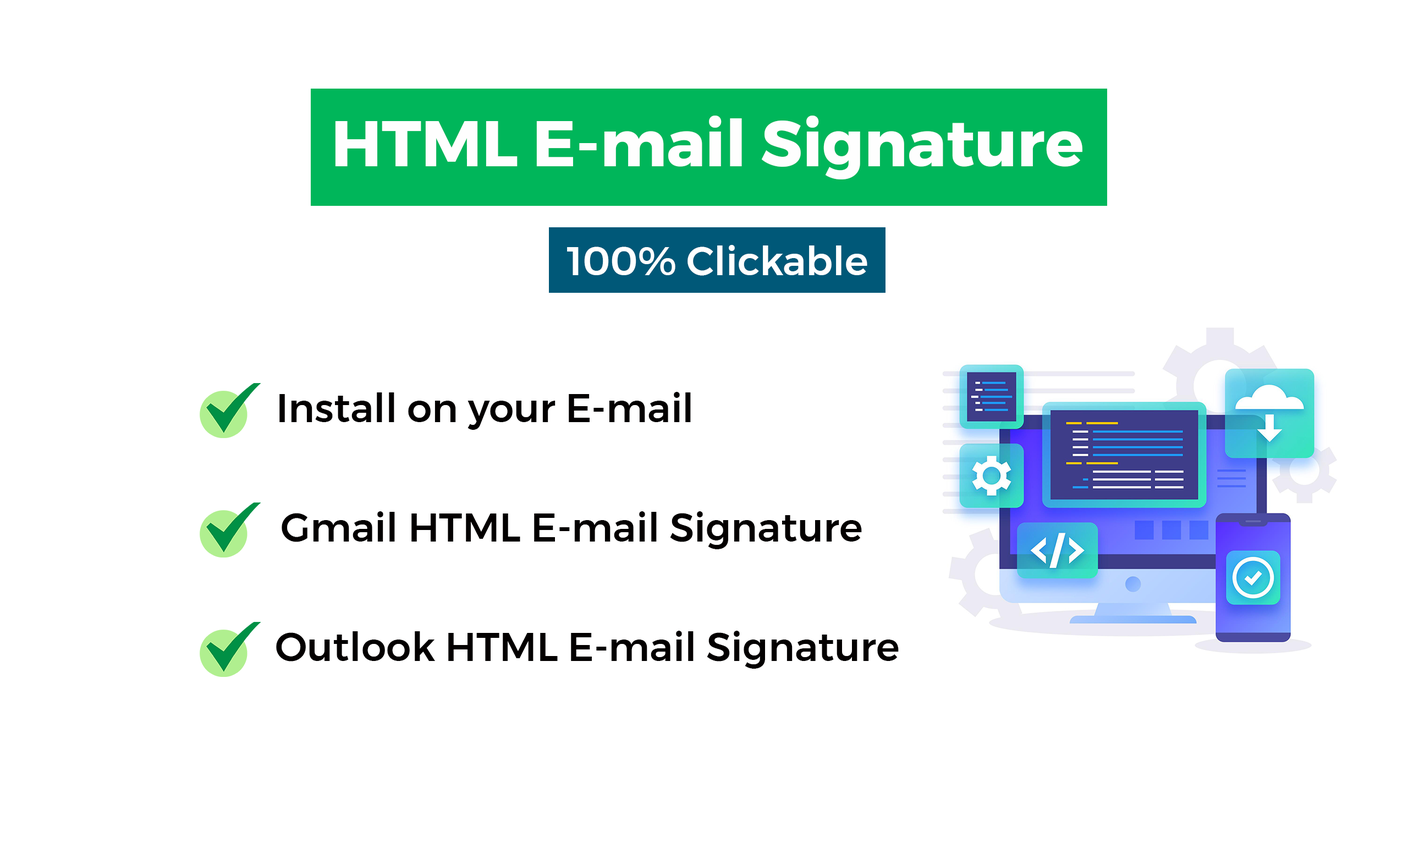
<style>
.page{position:relative;width:1408px;height:847px;background:#ffffff}
.page>*{position:absolute;margin:0}
.t1{font:64.4px "Montserrat-Bold";color:#fefefe}
.t2{font:39.6px "Montserrat-Medium";color:#ffffff}
.t3{font:39.6px "Montserrat-Medium";color:#030000}
</style>
<div class="page">
<p class="t1" style="left:335px;top:116px;width:748px;height:63px">HTML E-mail Signature</p>
<p class="t2" style="left:567px;top:245px;width:301px;height:31px">100% Clickable</p>
<p class="t3" style="left:279px;top:392px;width:412px;height:38px">Install on your E-mail</p>
<p class="t3" style="left:282px;top:511px;width:580px;height:38px">Gmail HTML E-mail Signature</p>
<p class="t3" style="left:276px;top:630px;width:623px;height:38px">Outlook HTML E-mail Signature</p>
</div>
